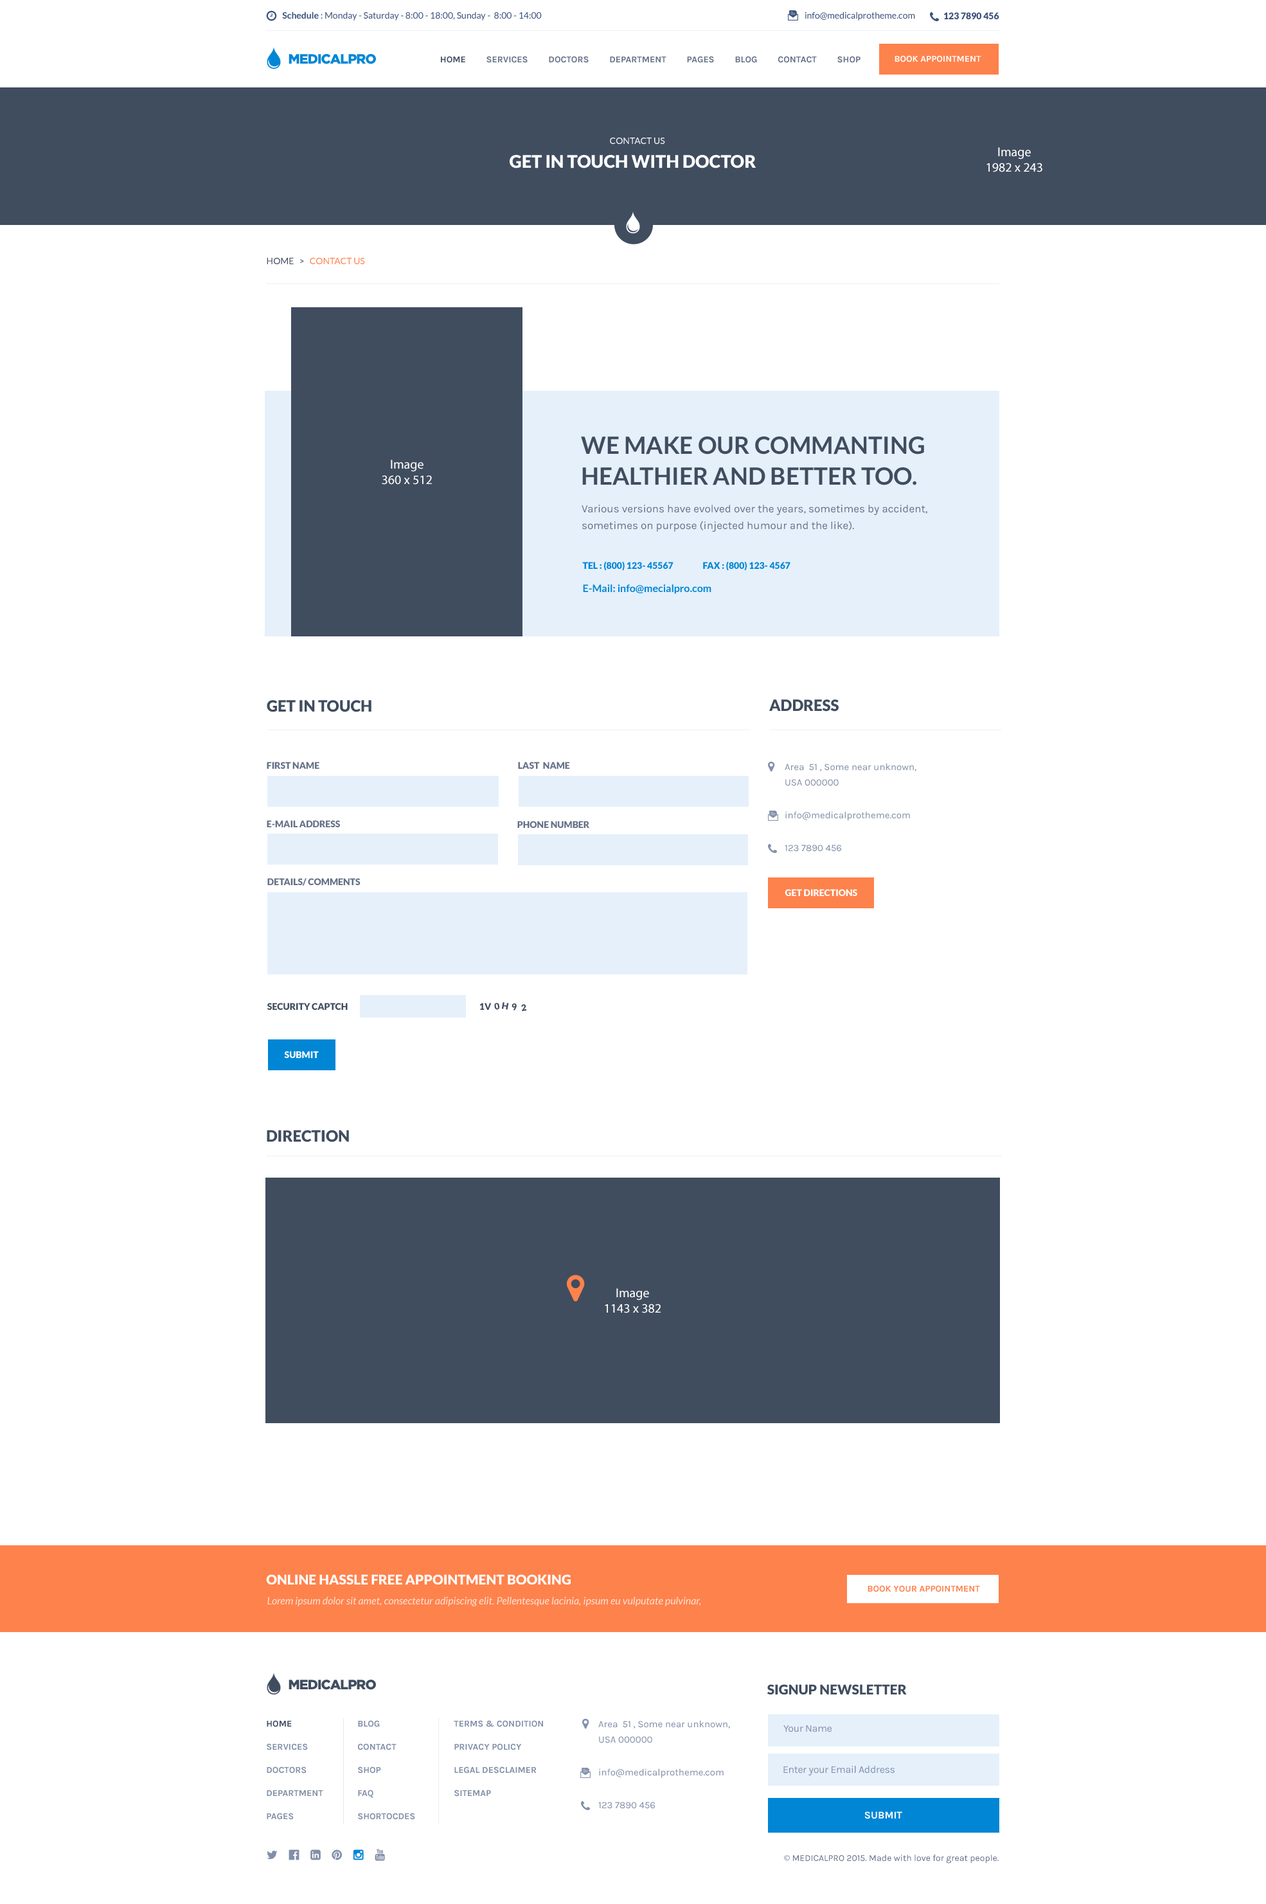
<style>
.page{position:relative;width:1266px;height:1904px;background:#ffffff}
.page>*{position:absolute;margin:0}
.t1{font:9px "Lato-Regular";color:#39527b}
.t2{font:9px "Lato-Bold";color:#39527b}
.t3{font:9px "Lato-Black";color:#39527b;text-transform:uppercase}
.t4{font:13.5px "Gotham-Black";letter-spacing:-0.05em;color:#0186d5;text-transform:uppercase}
.t5{font:9px "Karla-Bold";color:#657188;text-transform:uppercase}
.t6{font:9px "Karla-Bold";color:#404d5f;text-transform:uppercase}
.t7{font:9px "Karla-Bold";color:#ffffff;text-transform:uppercase}
.t8{font:9px "Lato-Regular";color:#ffffff;text-transform:uppercase}
.t9{font:12.9px "MyriadPro-Regular";color:#ffffff}
.t10{font:17.4px "Lato-Black";color:#ffffff;text-transform:uppercase}
.t11{font:9px "Lato-Regular";color:#fe824c;text-transform:uppercase}
.t12{font:9px "Lato-Regular";color:#404d5f;text-transform:uppercase}
.t13{font:23.8px/30.9px "Lato-Bold";color:#404d5f;text-transform:uppercase}
.t14{font:10.9px/16.7px "Karla-Regular";color:#657188}
.t15{font:9px "Lato-Black";color:#0186d5;text-transform:uppercase}
.t16{font:10.3px "Lato-Bold";color:#0186d5}
.t17{font:15.4px "Lato-Black";color:#404d5f;text-transform:uppercase}
.t18{font:9px "Lato-Black";color:#657188;text-transform:uppercase}
.t19{font:9.6px/15.4px "Karla-Regular";color:#828fa8}
.t20{font:9.6px "Karla-Regular";color:#828fa8}
.t21{font:9.6px "Karla-Regular";color:#828fa8;text-transform:uppercase}
.t22{font:9px "Lato-Black";color:#ffffff;text-transform:uppercase}
.t23{font:9px "Lato-Black";color:#404d5f;text-transform:uppercase}
.t24{font:13.5px "Lato-Black";color:#ffffff;text-transform:uppercase}
.t25{font:9px "Karla-Bold";color:#fe824c;text-transform:uppercase}
.t26{font:10.3px "Lato-Italic";color:#ffe2d5}
.t27{font:13.5px "Gotham-Black";letter-spacing:-0.05em;color:#404d5f;text-transform:uppercase}
.t28{font:13.5px "Lato-Black";color:#404d5f;text-transform:uppercase}
.t29{font:9px/23.1px "Karla-Bold";color:#828fa8;text-transform:uppercase}
.t30{font:9px/23.1px "Karla-Bold";color:#404d5f;text-transform:uppercase}
.t31{font:10.3px "Karla-Regular";letter-spacing:-0.025em;color:#828fa8}
.t32{font:10.3px "Karla-Bold";color:#ffffff;text-transform:uppercase}
.t33{font:9px "Karla-Regular";color:#657188}
.t34{font:9px "MyriadPro-Regular";color:#657188}
</style>
<div class="page">
<p class="t1" style="left:282px;top:12px;width:260px;height:9px"><span class="t2">Schedule</span> : Monday - Saturday - 8:00 - 18:00, Sunday -  8:00 - 14:00</p>
<p class="t1" style="left:805px;top:12px;width:110px;height:9px">info@medicalprotheme.com</p>
<p class="t3" style="left:944px;top:12px;width:56px;height:7px">123 7890 456</p>
<p class="t4" style="left:289px;top:54px;width:87px;height:10px">MEDICALPRO</p>
<p class="t5" style="left:441px;top:56px;width:420px;height:7px"><span class="t6">Home</span>         Services         Doctors         DEPARTMENT         Pages         Blog         Contact         Shop</p>
<p class="t7" style="left:895px;top:55px;width:87px;height:7px">BOOK APPOINTMENT</p>
<p class="t8" style="left:610px;top:138px;width:55px;height:6px">contact us</p>
<p class="t9" style="left:987px;top:147px;width:56px;height:25px;text-align:center">Image<br>1982 x 243</p>
<p class="t10" style="left:510px;top:155px;width:247px;height:13px">get in touch with doctor</p>
<p class="t11" style="left:267px;top:258px;width:98px;height:6px"><span class="t12">home   &gt;   </span>contact us</p>
<p class="t13" style="left:581px;top:436px;width:343px;height:49px">we make our commanting<br>healthier and better too.</p>
<p class="t9" style="left:382px;top:460px;width:50px;height:25px;text-align:center">Image<br>360 x 512</p>
<p class="t14" style="left:582px;top:505px;width:346px;height:27px">Various versions have evolved over the years, sometimes by accident, sometimes on purpose (injected humour and the like).</p>
<p class="t15" style="left:582px;top:561px;width:92px;height:10px">tel : (800) 123- 45567</p>
<p class="t15" style="left:703px;top:561px;width:88px;height:10px">FAX : (800) 123- 4567</p>
<p class="t16" style="left:583px;top:584px;width:129px;height:10px">E-Mail: info@mecialpro.com</p>
<p class="t17" style="left:267px;top:700px;width:105px;height:12px">Get in touch</p>
<p class="t17" style="left:769px;top:699px;width:70px;height:13px">address</p>
<p class="t18" style="left:267px;top:762px;width:52px;height:7px">First name</p>
<p class="t18" style="left:518px;top:762px;width:52px;height:7px">last  name</p>
<p class="t19" style="left:785px;top:763px;width:132px;height:23px">Area  51 , Some near unknown, <br>USA 000000</p>
<p class="t18" style="left:267px;top:820px;width:73px;height:7px">e-Mail address</p>
<p class="t18" style="left:517px;top:821px;width:72px;height:7px">Phone number</p>
<p class="t20" style="left:786px;top:811px;width:124px;height:10px">info@medicalprotheme.com</p>
<p class="t21" style="left:785px;top:845px;width:56px;height:7px">123 7890 456</p>
<p class="t18" style="left:267px;top:878px;width:94px;height:8px">Details/ comments</p>
<p class="t22" style="left:785px;top:889px;width:73px;height:7px">get directions</p>
<p class="t23" style="left:267px;top:1003px;width:81px;height:7px">Security Captch</p>
<p class="t23" style="left:480px;top:1003px;width:12px;height:7px">1v</p>
<p class="t23" style="left:494px;top:1003px;width:5px;height:7px;rotate:-9deg">0</p>
<p class="t23" style="left:501px;top:1002px;width:8px;height:8px;rotate:10deg">h</p>
<p class="t23" style="left:512px;top:1003px;width:5px;height:8px;rotate:-11deg">9</p>
<p class="t23" style="left:521px;top:1004px;width:6px;height:7px;rotate:-8deg">2</p>
<p class="t22" style="left:284px;top:1051px;width:35px;height:7px">submit</p>
<p class="t17" style="left:267px;top:1130px;width:82px;height:12px">direction</p>
<p class="t9" style="left:605px;top:1288px;width:56px;height:25px;text-align:center">Image<br>1143 x 382</p>
<p class="t24" style="left:266px;top:1574px;width:305px;height:11px">ONLINE HASSLE FREE Appointment BOOKING</p>
<p class="t25" style="left:868px;top:1585px;width:112px;height:7px">BOOK YOUR APPOINTMENT</p>
<p class="t26" style="left:267px;top:1597px;width:434px;height:9px">Lorem ipsum dolor sit amet, consectetur adipiscing elit. Pellentesque lacinia, ipsum eu vulputate pulvinar,</p>
<p class="t27" style="left:289px;top:1680px;width:87px;height:10px">MEDICALPRO</p>
<p class="t28" style="left:768px;top:1684px;width:139px;height:11px">SIGNUP NEWSLETTER</p>
<p class="t29" style="left:267px;top:1720px;width:56px;height:100px"><span class="t30">Home<br></span>Services<br>Doctors<br>DEPARTMENT<br>Pages</p>
<p class="t29" style="left:358px;top:1720px;width:57px;height:100px">Blog<br>Contact<br>Shop<br>faq<br>shortocdes</p>
<p class="t29" style="left:454px;top:1720px;width:89px;height:77px">TERms &amp; Condition<br>Privacy policy<br>Legal desclaimer<br>sitemap</p>
<p class="t19" style="left:598px;top:1720px;width:132px;height:23px">Area  51 , Some near unknown, <br>USA 000000</p>
<p class="t31" style="left:784px;top:1725px;width:48px;height:7px">Your Name</p>
<p class="t20" style="left:599px;top:1768px;width:125px;height:10px">info@medicalprotheme.com</p>
<p class="t31" style="left:784px;top:1766px;width:111px;height:10px">Enter your Email Address</p>
<p class="t21" style="left:598px;top:1802px;width:57px;height:7px">123 7890 456</p>
<p class="t32" style="left:865px;top:1812px;width:38px;height:7px">submit</p>
<p class="t33" style="left:784px;top:1855px;width:215px;height:9px"><span class="t34">©</span> MEDICALPRO 2015. Made with love for great people.</p>
</div>
